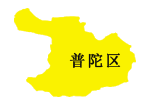
<style>
.page{position:relative;width:144px;height:104px;background:#ffffff}
.page>*{position:absolute;margin:0}
.t1{font:15.7px "NSimSun";letter-spacing:0.12em;color:#0c0c0c;font-weight:bold}
</style>
<div class="page">
<p class="t1" style="left:69px;top:52px;width:52px;height:16px">普陀区</p>
</div>
